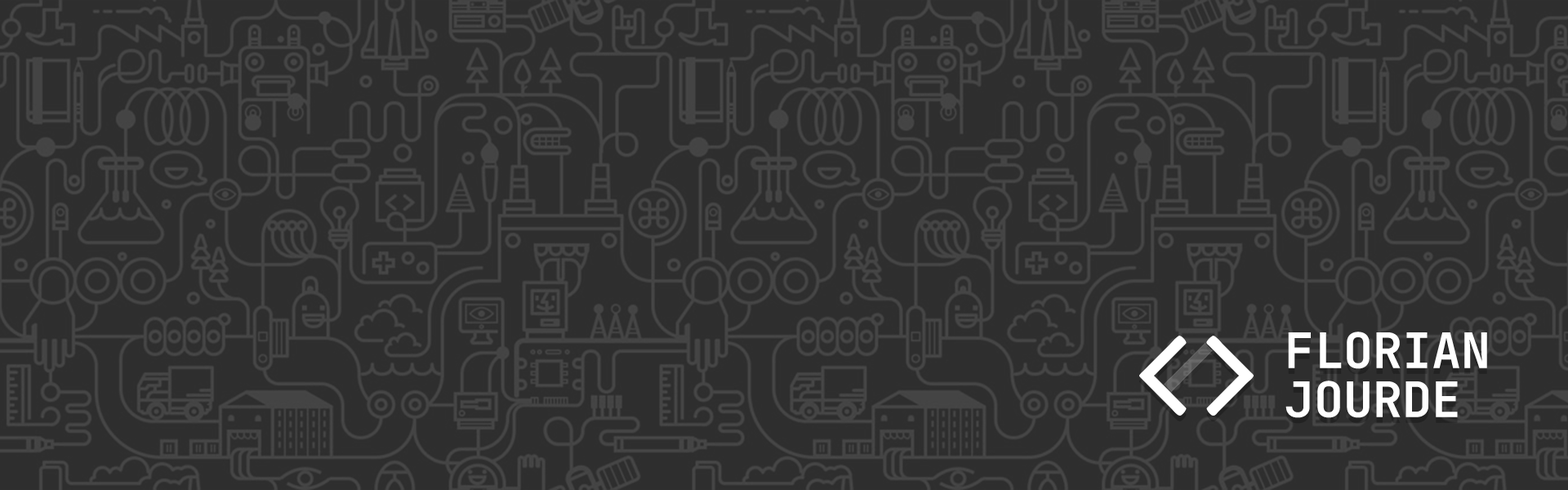
<style>
.page{position:relative;width:1568px;height:490px;background:#2e2e2e}
.page>*{position:absolute;margin:0}
.t1{font:49px "JetBrainsMono-Bold";color:#ffffff;text-transform:uppercase}
</style>
<div class="page">
<p class="t1" style="left:1285px;top:332px;width:202px;height:86px">Florian Jourde</p>
</div>
